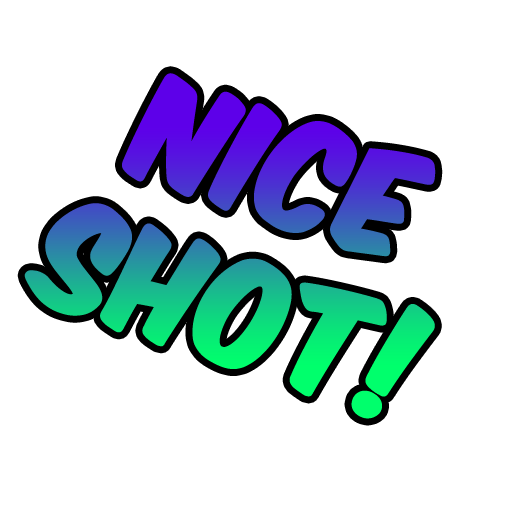
<style>
.page{position:relative;width:512px;height:512px;background:#ffffff}
.page>*{position:absolute;margin:0}
.t1{font:125px "KomikaAxis";font-weight:bold}
</style>
<div class="page">
<p class="t1" style="left:24px;top:73px;width:412px;height:346px;text-align:center;rotate:19deg">Nice <br>Shot!</p>
</div>
